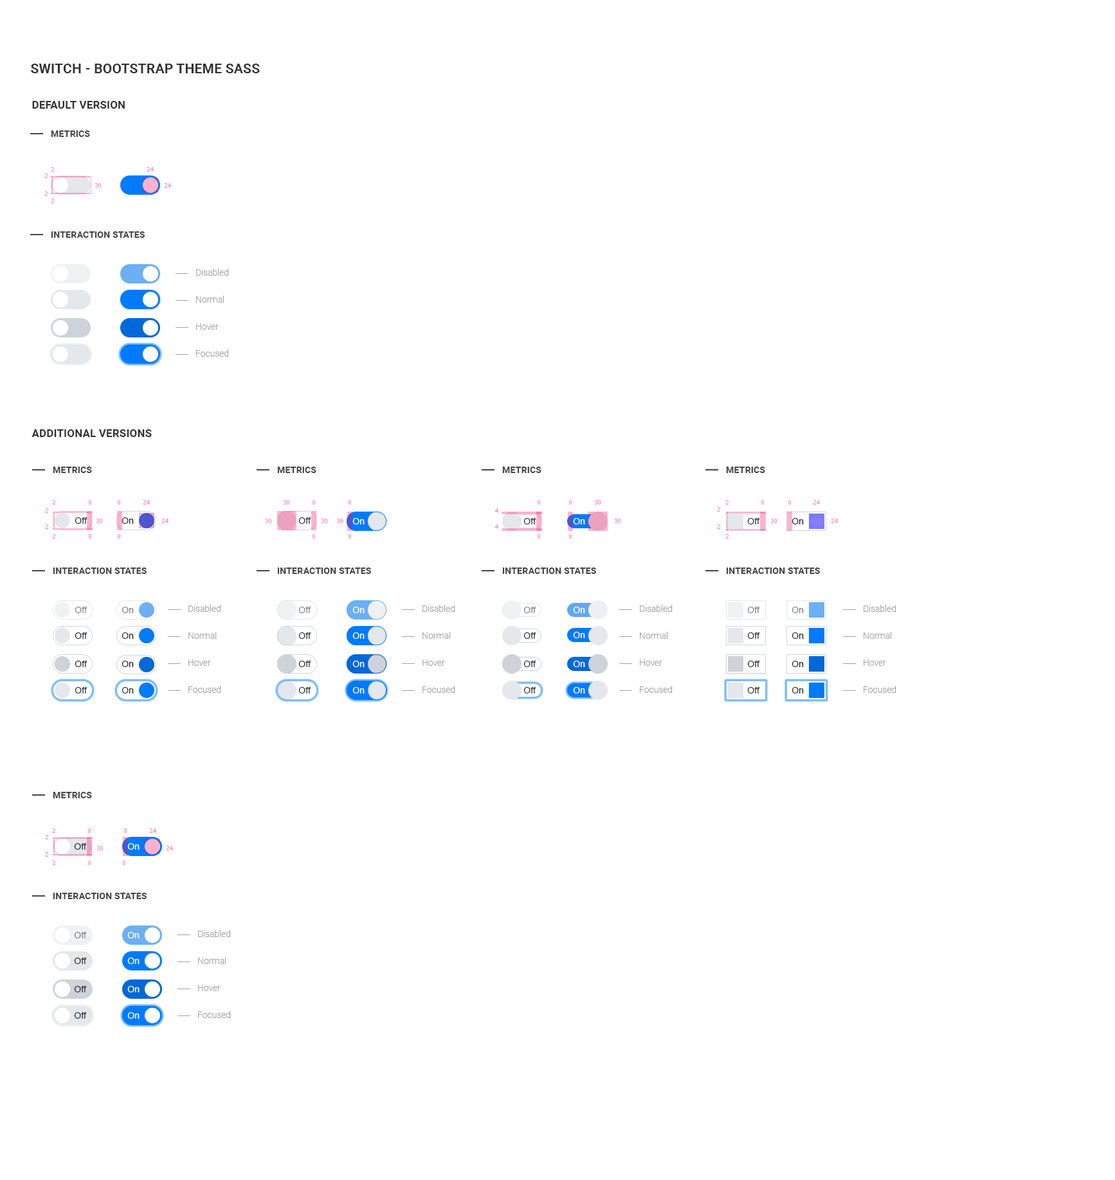
<style>
.page{position:relative;width:1115px;height:1180px;background:#ffffff}
.page>*{position:absolute;margin:0}
.t1{font:13.5px "Roboto-Bold";letter-spacing:0.01em;color:#313131;text-transform:uppercase}
.t2{font:10.9px "Roboto-Bold";letter-spacing:0.01em;color:#313131;text-transform:uppercase}
.t3{font:9px "Roboto-Bold";letter-spacing:0.01em;color:#454545;text-transform:uppercase}
.t4{font:5.8px "Tahoma";color:#ff7cae}
.t5{font:9px/27px "Roboto-Light";color:#a1a1a1}
.t6{font:9px "ArialMT";letter-spacing:0.01em;color:#212529}
.t7{font:9px "ArialMT";letter-spacing:0.01em;color:#feffff}
.t8{font:9px "ArialMT";letter-spacing:0.01em;color:#7a7c7f}
.t9{font:9px "ArialMT";letter-spacing:0.01em;color:#7a7c7e}
.t10{font:9px "ArialMT";letter-spacing:0.01em;color:#ffffff}
</style>
<div class="page">
<p class="t1" style="left:31px;top:64px;width:229px;height:9px">switch - bootstrap theme sass</p>
<p class="t2" style="left:32px;top:101px;width:93px;height:8px">default version</p>
<p class="t3" style="left:51px;top:130px;width:39px;height:7px">Metrics</p>
<p class="t4" style="left:45px;top:174px;width:3px;height:4px">2</p>
<p class="t4" style="left:51px;top:167px;width:3px;height:5px">2</p>
<p class="t4" style="left:147px;top:167px;width:7px;height:5px">24</p>
<p class="t4" style="left:95px;top:183px;width:6px;height:5px">30</p>
<p class="t4" style="left:165px;top:183px;width:6px;height:5px">24</p>
<p class="t4" style="left:45px;top:192px;width:3px;height:4px">2</p>
<p class="t4" style="left:51px;top:199px;width:3px;height:4px">2</p>
<p class="t3" style="left:51px;top:231px;width:94px;height:7px">Interaction states</p>
<p class="t5" style="left:196px;top:269px;width:33px;height:88px">Disabled<br>Normal<br>Hover<br>Focused</p>
<p class="t2" style="left:32px;top:429px;width:120px;height:8px">additional versions</p>
<p class="t3" style="left:53px;top:467px;width:39px;height:6px">Metrics</p>
<p class="t3" style="left:277px;top:467px;width:39px;height:6px">Metrics</p>
<p class="t3" style="left:502px;top:467px;width:39px;height:6px">Metrics</p>
<p class="t3" style="left:726px;top:467px;width:39px;height:6px">Metrics</p>
<p class="t4" style="left:46px;top:509px;width:2px;height:4px">2</p>
<p class="t4" style="left:53px;top:500px;width:2px;height:5px">2</p>
<p class="t4" style="left:89px;top:500px;width:2px;height:5px">8</p>
<p class="t4" style="left:118px;top:500px;width:2px;height:5px">8</p>
<p class="t4" style="left:143px;top:500px;width:7px;height:5px">24</p>
<p class="t4" style="left:284px;top:500px;width:5px;height:5px">30</p>
<p class="t4" style="left:312px;top:500px;width:3px;height:5px">8</p>
<p class="t4" style="left:348px;top:500px;width:3px;height:5px">8</p>
<p class="t4" style="left:495px;top:509px;width:3px;height:4px">4</p>
<p class="t4" style="left:537px;top:500px;width:3px;height:5px">8</p>
<p class="t4" style="left:569px;top:500px;width:3px;height:5px">8</p>
<p class="t4" style="left:595px;top:500px;width:5px;height:5px">30</p>
<p class="t4" style="left:717px;top:507px;width:3px;height:5px">2</p>
<p class="t4" style="left:726px;top:500px;width:2px;height:5px">2</p>
<p class="t4" style="left:761px;top:500px;width:3px;height:5px">8</p>
<p class="t4" style="left:788px;top:500px;width:3px;height:5px">8</p>
<p class="t4" style="left:813px;top:500px;width:7px;height:5px">24</p>
<p class="t6" style="left:75px;top:518px;width:12px;height:6px">Off</p>
<p class="t4" style="left:96px;top:519px;width:6px;height:4px">30</p>
<p class="t6" style="left:122px;top:518px;width:12px;height:6px">On</p>
<p class="t4" style="left:162px;top:519px;width:6px;height:4px">24</p>
<p class="t4" style="left:266px;top:519px;width:5px;height:4px">30</p>
<p class="t6" style="left:298px;top:518px;width:13px;height:6px">Off</p>
<p class="t4" style="left:321px;top:519px;width:6px;height:4px">30</p>
<p class="t4" style="left:337px;top:519px;width:6px;height:4px">30</p>
<p class="t7" style="left:352px;top:518px;width:12px;height:7px">On</p>
<p class="t6" style="left:523px;top:518px;width:13px;height:7px">Off</p>
<p class="t7" style="left:573px;top:518px;width:12px;height:7px">On</p>
<p class="t4" style="left:615px;top:519px;width:5px;height:4px">30</p>
<p class="t6" style="left:747px;top:518px;width:13px;height:7px">Off</p>
<p class="t4" style="left:771px;top:519px;width:6px;height:4px">30</p>
<p class="t6" style="left:791px;top:518px;width:13px;height:7px">On</p>
<p class="t4" style="left:831px;top:519px;width:7px;height:4px">24</p>
<p class="t4" style="left:46px;top:525px;width:2px;height:4px">2</p>
<p class="t4" style="left:495px;top:525px;width:3px;height:4px">4</p>
<p class="t4" style="left:717px;top:525px;width:3px;height:4px">2</p>
<p class="t4" style="left:53px;top:534px;width:2px;height:5px">2</p>
<p class="t4" style="left:89px;top:534px;width:2px;height:5px">8</p>
<p class="t4" style="left:118px;top:534px;width:2px;height:5px">8</p>
<p class="t4" style="left:312px;top:534px;width:3px;height:5px">8</p>
<p class="t4" style="left:348px;top:534px;width:3px;height:5px">8</p>
<p class="t4" style="left:537px;top:534px;width:3px;height:5px">8</p>
<p class="t4" style="left:569px;top:534px;width:3px;height:5px">8</p>
<p class="t4" style="left:726px;top:534px;width:2px;height:5px">2</p>
<p class="t3" style="left:53px;top:568px;width:94px;height:6px">Interaction states</p>
<p class="t3" style="left:277px;top:568px;width:94px;height:6px">Interaction states</p>
<p class="t3" style="left:502px;top:568px;width:94px;height:6px">Interaction states</p>
<p class="t3" style="left:726px;top:568px;width:94px;height:6px">Interaction states</p>
<p class="t5" style="left:188px;top:605px;width:33px;height:88px">Disabled<br>Normal<br>Hover<br>Focused</p>
<p class="t5" style="left:422px;top:605px;width:33px;height:88px">Disabled<br>Normal<br>Hover<br>Focused</p>
<p class="t5" style="left:640px;top:605px;width:32px;height:88px">Disabled<br>Normal<br>Hover<br>Focused</p>
<p class="t5" style="left:863px;top:605px;width:33px;height:88px">Disabled<br>Normal<br>Hover<br>Focused</p>
<p class="t8" style="left:75px;top:607px;width:12px;height:6px">Off</p>
<p class="t9" style="left:122px;top:607px;width:12px;height:6px">On</p>
<p class="t8" style="left:298px;top:607px;width:13px;height:6px">Off</p>
<p class="t10" style="left:352px;top:607px;width:12px;height:6px">On</p>
<p class="t8" style="left:523px;top:607px;width:13px;height:6px">Off</p>
<p class="t10" style="left:573px;top:607px;width:12px;height:6px">On</p>
<p class="t8" style="left:747px;top:607px;width:13px;height:6px">Off</p>
<p class="t9" style="left:791px;top:607px;width:13px;height:6px">On</p>
<p class="t6" style="left:75px;top:633px;width:12px;height:6px">Off</p>
<p class="t6" style="left:122px;top:633px;width:12px;height:6px">On</p>
<p class="t6" style="left:298px;top:633px;width:13px;height:6px">Off</p>
<p class="t7" style="left:352px;top:633px;width:12px;height:6px">On</p>
<p class="t6" style="left:523px;top:633px;width:13px;height:6px">Off</p>
<p class="t7" style="left:573px;top:632px;width:12px;height:6px">On</p>
<p class="t6" style="left:747px;top:633px;width:13px;height:6px">Off</p>
<p class="t6" style="left:791px;top:633px;width:13px;height:6px">On</p>
<p class="t6" style="left:75px;top:661px;width:12px;height:6px">Off</p>
<p class="t6" style="left:122px;top:661px;width:12px;height:6px">On</p>
<p class="t6" style="left:298px;top:661px;width:13px;height:6px">Off</p>
<p class="t7" style="left:352px;top:661px;width:12px;height:6px">On</p>
<p class="t6" style="left:523px;top:661px;width:13px;height:6px">Off</p>
<p class="t7" style="left:573px;top:661px;width:12px;height:6px">On</p>
<p class="t6" style="left:747px;top:661px;width:13px;height:6px">Off</p>
<p class="t6" style="left:791px;top:661px;width:13px;height:6px">On</p>
<p class="t6" style="left:75px;top:687px;width:12px;height:7px">Off</p>
<p class="t6" style="left:122px;top:687px;width:12px;height:7px">On</p>
<p class="t6" style="left:298px;top:687px;width:13px;height:7px">Off</p>
<p class="t10" style="left:352px;top:687px;width:12px;height:7px">On</p>
<p class="t6" style="left:523px;top:687px;width:13px;height:7px">Off</p>
<p class="t10" style="left:573px;top:687px;width:12px;height:7px">On</p>
<p class="t6" style="left:747px;top:687px;width:13px;height:7px">Off</p>
<p class="t6" style="left:791px;top:687px;width:13px;height:7px">On</p>
<p class="t3" style="left:53px;top:792px;width:39px;height:6px">Metrics</p>
<p class="t4" style="left:53px;top:829px;width:2px;height:4px">2</p>
<p class="t4" style="left:88px;top:829px;width:3px;height:4px">8</p>
<p class="t4" style="left:124px;top:829px;width:3px;height:4px">8</p>
<p class="t4" style="left:150px;top:829px;width:6px;height:4px">24</p>
<p class="t4" style="left:46px;top:835px;width:2px;height:5px">2</p>
<p class="t6" style="left:74px;top:843px;width:13px;height:7px">Off</p>
<p class="t7" style="left:127px;top:843px;width:13px;height:7px">On</p>
<p class="t4" style="left:46px;top:852px;width:2px;height:5px">2</p>
<p class="t4" style="left:97px;top:846px;width:6px;height:5px">30</p>
<p class="t4" style="left:166px;top:846px;width:7px;height:5px">24</p>
<p class="t4" style="left:53px;top:861px;width:2px;height:4px">2</p>
<p class="t4" style="left:88px;top:861px;width:3px;height:4px">8</p>
<p class="t4" style="left:123px;top:861px;width:2px;height:4px">8</p>
<p class="t3" style="left:53px;top:893px;width:94px;height:6px">Interaction states</p>
<p class="t8" style="left:74px;top:932px;width:13px;height:7px">Off</p>
<p class="t10" style="left:127px;top:932px;width:13px;height:7px">On</p>
<p class="t5" style="left:198px;top:930px;width:33px;height:88px">Disabled<br>Normal<br>Hover<br>Focused</p>
<p class="t6" style="left:74px;top:958px;width:13px;height:6px">Off</p>
<p class="t7" style="left:127px;top:958px;width:13px;height:6px">On</p>
<p class="t6" style="left:74px;top:986px;width:13px;height:7px">Off</p>
<p class="t7" style="left:127px;top:986px;width:13px;height:7px">On</p>
<p class="t6" style="left:74px;top:1013px;width:13px;height:6px">Off</p>
<p class="t10" style="left:127px;top:1013px;width:13px;height:6px">On</p>
</div>
